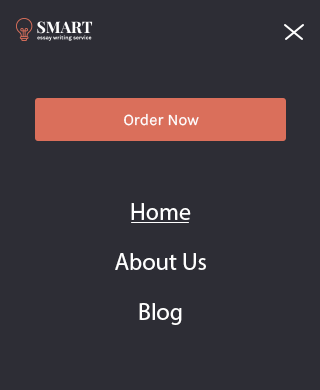
<style>
.page{position:relative;width:320px;height:390px;background:#2d2d35}
.page>*{position:absolute;margin:0}
.t1{font:16px "Karla-Regular";color:#ffffff}
.t2{font:24px "MyriadPro-Regular";color:#ffffff}
</style>
<div class="page">
<p class="t1" style="left:124px;top:113px;width:75px;height:13px">Order Now</p>
<p class="t2" style="left:131px;top:203px;width:60px;height:17px">Home</p>
<p class="t2" style="left:115px;top:253px;width:91px;height:17px">About Us</p>
<p class="t2" style="left:139px;top:303px;width:43px;height:22px">Blog</p>
</div>
